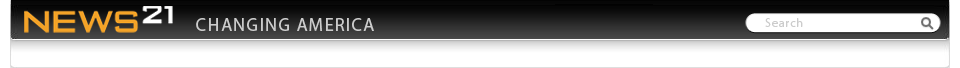
<style>
.page{position:relative;width:960px;height:68px;background:#ffffff}
.page>*{position:absolute;margin:0}
.t1{font:18px "MyriadPro-Regular";letter-spacing:0.075em;color:#cccccc}
.t2{font:12px "MyriadPro-Regular";letter-spacing:0.075em;color:#cccccc}
</style>
<div class="page">
<p class="t1" style="left:196px;top:18px;width:178px;height:13px">CHANGING AMERICA</p>
<p class="t2" style="left:765px;top:18px;width:38px;height:9px">Search</p>
</div>
